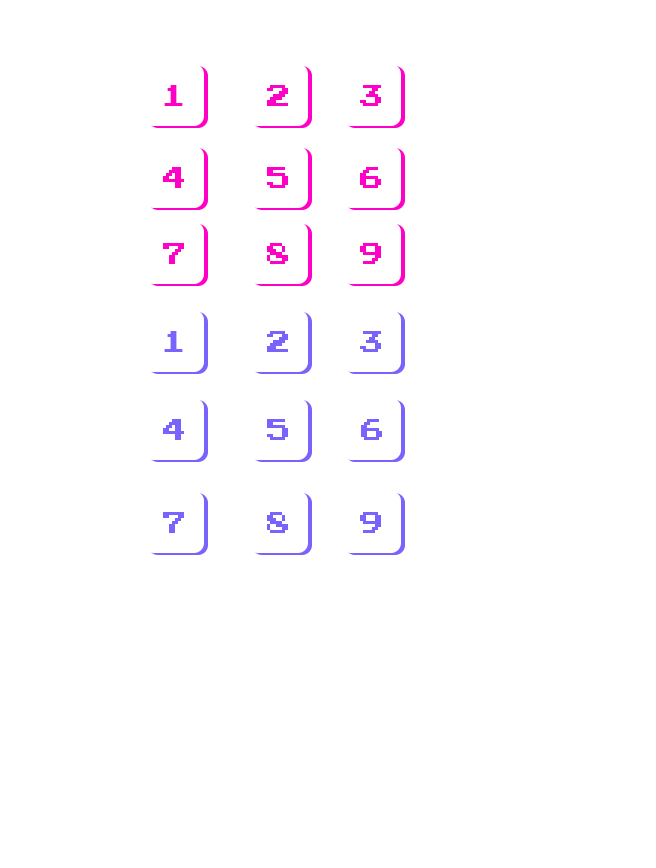
<style>
.page{position:relative;width:656px;height:868px;background:#ffffff}
.page>*{position:absolute;margin:0}
.t1{font:30px "JoystixMonospace-Regular";color:#ff00c6}
.t2{font:30px "JoystixMonospace-Regular";color:#7963fd}
</style>
<div class="page">
<p class="t1" style="left:164px;top:85px;width:19px;height:21px">1</p>
<p class="t1" style="left:267px;top:85px;width:21px;height:21px">2</p>
<p class="t1" style="left:360px;top:85px;width:21px;height:21px">3</p>
<p class="t1" style="left:163px;top:167px;width:21px;height:21px">4</p>
<p class="t1" style="left:267px;top:167px;width:21px;height:21px">5</p>
<p class="t1" style="left:360px;top:167px;width:21px;height:21px">6</p>
<p class="t1" style="left:163px;top:243px;width:21px;height:21px">7</p>
<p class="t1" style="left:267px;top:243px;width:21px;height:21px">8</p>
<p class="t1" style="left:360px;top:243px;width:21px;height:21px">9</p>
<p class="t2" style="left:164px;top:331px;width:19px;height:21px">1</p>
<p class="t2" style="left:267px;top:331px;width:21px;height:21px">2</p>
<p class="t2" style="left:360px;top:331px;width:21px;height:21px">3</p>
<p class="t2" style="left:163px;top:419px;width:21px;height:21px">4</p>
<p class="t2" style="left:267px;top:419px;width:21px;height:21px">5</p>
<p class="t2" style="left:361px;top:419px;width:21px;height:21px">6</p>
<p class="t2" style="left:163px;top:512px;width:21px;height:21px">7</p>
<p class="t2" style="left:267px;top:512px;width:21px;height:21px">8</p>
<p class="t2" style="left:360px;top:512px;width:21px;height:21px">9</p>
</div>
